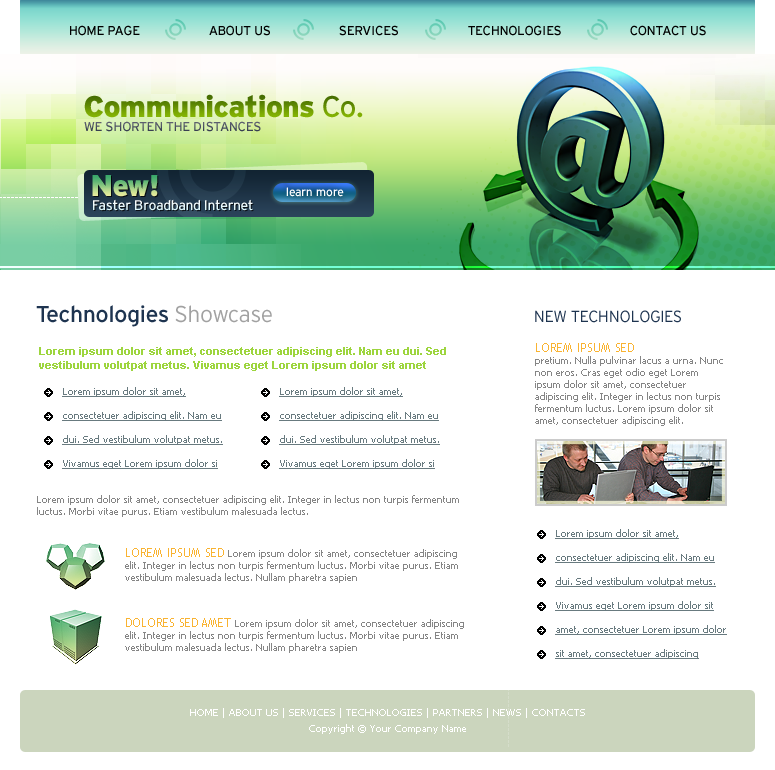
<style>
.page{position:relative;width:775px;height:770px;background:#ffffff}
.page>*{position:absolute;margin:0}
.t1{font:13px "Interstate-Regular";letter-spacing:-0.02em;color:#000000;text-transform:uppercase}
.t2{font:30px "Interstate-Black";letter-spacing:-0.02em}
.t3{font:30px "Interstate-Regular";letter-spacing:-0.02em}
.t4{font:13px "Interstate-Regular";letter-spacing:-0.02em;color:#515565;text-transform:uppercase}
.t5{font:12px "Interstate-Regular";letter-spacing:-0.02em;color:#ffffff}
.t6{font:14px "Interstate-Regular";letter-spacing:-0.02em;color:#e7f8fb}
.t7{font:23px "Interstate-Regular";letter-spacing:-0.02em;color:#1e3450}
.t8{font:23px "Interstate-Light";letter-spacing:-0.02em;color:#a1a1a1}
.t9{font:16px "Interstate-Light";letter-spacing:-0.02em;color:#1e3450;text-transform:uppercase}
.t10{font:11px/14px "Arial-BoldMT";color:#9dd53e}
.t11{font:10px/12px "Tahoma";color:#858585}
.t12{font:12px/10px "TrebuchetMS";color:#f9b331;text-transform:uppercase}
.t13{font:10px/24px "Tahoma";color:#687a7f;text-decoration:underline}
.t14{font:10px/16px "Tahoma";color:#ffffff}
</style>
<div class="page">
<p class="t1" style="left:70px;top:25px;width:70px;height:11px">HOME PAGE</p>
<p class="t1" style="left:209px;top:25px;width:61px;height:11px">ABOUT US</p>
<p class="t1" style="left:339px;top:25px;width:59px;height:11px">SERVICES</p>
<p class="t1" style="left:468px;top:25px;width:93px;height:11px">TECHNOLOGIES</p>
<p class="t1" style="left:630px;top:25px;width:76px;height:11px">CONTACT US</p>
<p class="t2" style="left:84px;top:94px;width:279px;height:24px">Communications<span class="t3"> Co.</span></p>
<p class="t4" style="left:84px;top:121px;width:177px;height:11px">WE SHORTEN THE DISTANCES</p>
<p class="t2" style="left:92px;top:175px;width:66px;height:22px">New!</p>
<p class="t5" style="left:286px;top:187px;width:58px;height:10px">learn more</p>
<p class="t6" style="left:93px;top:199px;width:160px;height:12px">Faster Broadband Internet</p>
<p class="t7" style="left:36px;top:305px;width:236px;height:22px">Technologies <span class="t8">Showcase</span></p>
<p class="t9" style="left:535px;top:310px;width:146px;height:13px">NEW TECHNOLOGIES</p>
<p class="t10" style="left:39px;top:347px;width:407px;height:24px">Lorem ipsum dolor sit amet, consectetuer adipiscing elit. Nam eu dui. Sed vestibulum volutpat metus. Vivamus eget Lorem ipsum dolor sit amet</p>
<p class="t11" style="left:535px;top:343px;width:188px;height:83px"><span class="t12">LOREM IPSUM sed <br></span>pretium. Nulla pulvinar lacus a urna. Nunc non eros. Cras eget odio eget Lorem ipsum dolor sit amet, consectetuer adipiscing elit. Integer in lectus non turpis fermentum luctus. Lorem ipsum dolor sit amet, consectetuer adipiscing elit.</p>
<p class="t13" style="left:62px;top:387px;width:161px;height:82px">Lorem ipsum dolor sit amet, consectetuer adipiscing elit. Nam eu dui. Sed vestibulum volutpat metus. Vivamus eget Lorem ipsum dolor si</p>
<p class="t13" style="left:279px;top:387px;width:161px;height:82px">Lorem ipsum dolor sit amet, consectetuer adipiscing elit. Nam eu dui. Sed vestibulum volutpat metus. Vivamus eget Lorem ipsum dolor si</p>
<p class="t11" style="left:37px;top:495px;width:422px;height:22px">Lorem ipsum dolor sit amet, consectetuer adipiscing elit. Integer in lectus non turpis fermentum luctus. Morbi vitae purus. Etiam vestibulum malesuada lectus.</p>
<p class="t13" style="left:555px;top:529px;width:172px;height:130px">Lorem ipsum dolor sit amet, consectetuer adipiscing elit. Nam eu dui. Sed vestibulum volutpat metus. Vivamus eget Lorem ipsum dolor sit amet, consectetuer Lorem ipsum dolor sit amet, consectetuer adipiscing</p>
<p class="t11" style="left:125px;top:548px;width:333px;height:35px"><span class="t12">LOREM IPSUM sed </span>Lorem ipsum dolor sit amet, consectetuer adipiscing elit. Integer in lectus non turpis fermentum luctus. Morbi vitae purus. Etiam vestibulum malesuada lectus. Nullam pharetra sapien</p>
<p class="t11" style="left:125px;top:618px;width:339px;height:35px"><span class="t12">DOLORES SED AMET </span>Lorem ipsum dolor sit amet, consectetuer adipiscing elit. Integer in lectus non turpis fermentum luctus. Morbi vitae purus. Etiam vestibulum malesuada lectus. Nullam pharetra sapien</p>
<p class="t14" style="left:190px;top:708px;width:395px;height:26px;text-align:center">HOME | ABOUT US | SERVICES | TECHNOLOGIES | PARTNERS | NEWS | CONTACTS<br>Copyright © Your Company Name</p>
</div>
